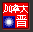
<style>
.page{position:relative;width:33px;height:32px;background:#f20000}
.page>*{position:absolute;margin:0}
.t1{font:10.4px "SimSun";letter-spacing:-0.25em;color:#ffffff}
.t2{font:11.7px "SimSun";color:#ffffff}
</style>
<div class="page">
<p class="t1" style="left:3px;top:4px;width:25px;height:9px">加拿大</p>
<p class="t2" style="left:16px;top:15px;width:11px;height:12px">晋</p>
</div>
